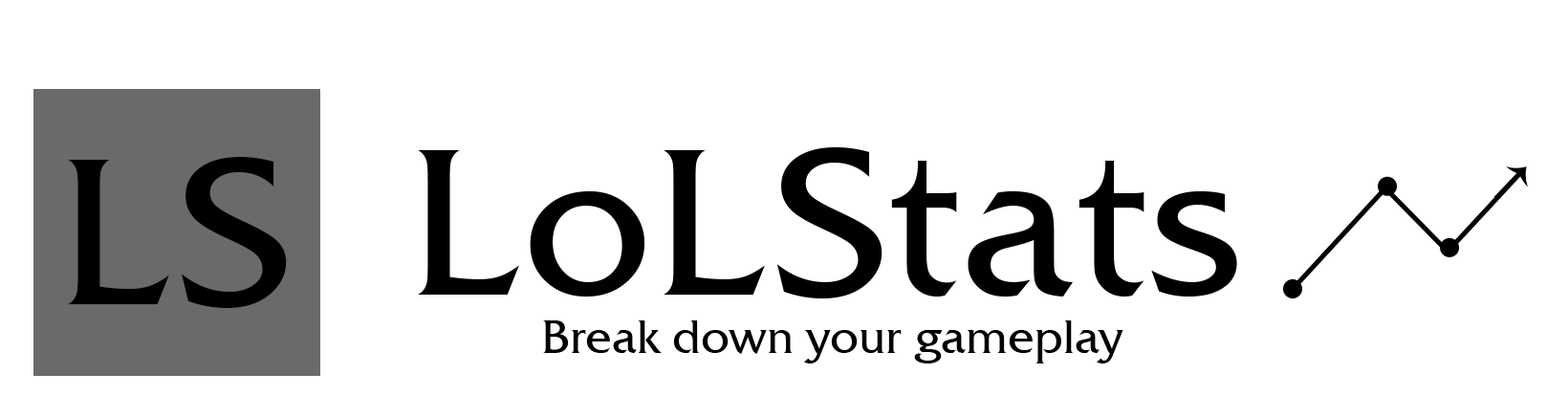
<style>
.page{position:relative;width:1568px;height:418px;background:#ffffff}
.page>*{position:absolute;margin:0}
.t1{font:207.2px "FrizQuadrataTT";color:#000000}
.t2{font:45.6px "FrizQuadrataTT";color:#000000}
</style>
<div class="page">
<p class="t1" style="left:418px;top:147px;width:819px;height:151px">LoLStats</p>
<p class="t2" style="left:543px;top:320px;width:580px;height:43px">Break down your gameplay</p>
</div>
